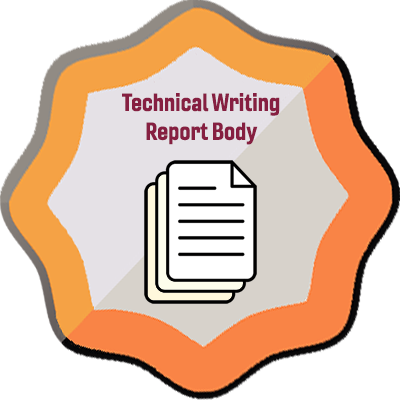
<style>
.page{position:relative;width:400px;height:400px;background:#ffffff}
.page>*{position:absolute;margin:0}
.t1{font:24px "Gineso-ConBol";color:#861f41}
</style>
<div class="page">
<p class="t1" style="left:122px;top:93px;width:158px;height:52px;text-align:center">Technical Writing<br>Report Body</p>
</div>
